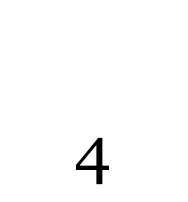
<style>
.page{position:relative;width:188px;height:202px;background:#ffffff}
.page>*{position:absolute;margin:0}
.t1{font:64.7px "Georgia";color:#000000}
</style>
<div class="page">
<p class="t1" style="left:76px;top:137px;width:33px;height:48px">4</p>
</div>
